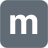
<style>
.page{position:relative;width:48px;height:48px;background:#616b75}
.page>*{position:absolute;margin:0}
.t1{font:35.2px "Helvetica-Bold";color:#ffffff}
</style>
<div class="page">
<p class="t1" style="left:10px;top:14px;width:28px;height:20px">m</p>
</div>
